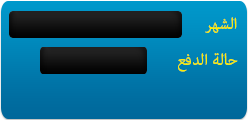
<style>
.page{position:relative;width:248px;height:120px}
.page>*{position:absolute;margin:0}
.t1{font:22px "AdobeArabic-Regular";color:#f9eb06}
</style>
<div class="page">
<p class="t1" style="left:205px;top:17px;width:32px;height:16px">الشهر</p>
<p class="t1" style="left:178px;top:53px;width:60px;height:19px">حالة الدفع</p>
</div>
